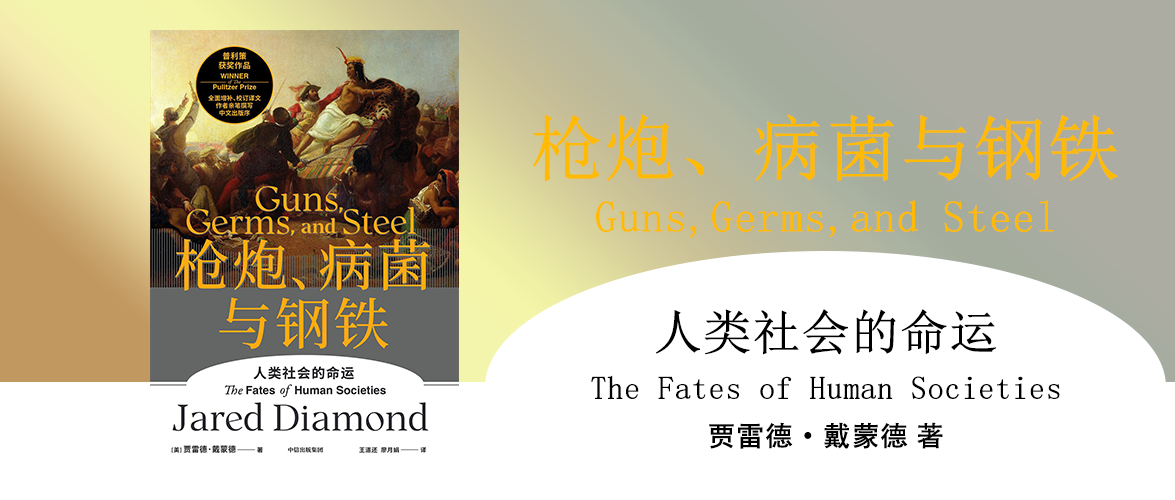
<style>
.page{position:relative;width:1175px;height:500px;background:#ffffff}
.page>*{position:absolute;margin:0}
.t1{font:72px "SimSun";color:#ffba06;font-weight:bold}
.t2{font:44px "SimSun";color:#ffba06;font-weight:bold}
.t3{font:48px "SimSun";color:#000000;font-weight:bold}
.t4{font:32px "SimSun";color:#000000;font-weight:bold}
.t5{font:28px "AdobeHeitiStd-Regular";color:#000000;font-weight:bold}
</style>
<div class="page">
<p class="t1" style="left:533px;top:114px;width:585px;height:68px">枪炮、病菌与钢铁</p>
<p class="t2" style="left:596px;top:200px;width:458px;height:38px">Guns,Germs,and Steel</p>
<p class="t3" style="left:656px;top:309px;width:340px;height:46px">人类社会的命运</p>
<p class="t4" style="left:591px;top:375px;width:469px;height:24px">The Fates of Human Societies</p>
<p class="t5" style="left:709px;top:422px;width:234px;height:27px">贾雷德·戴蒙德 著</p>
</div>
